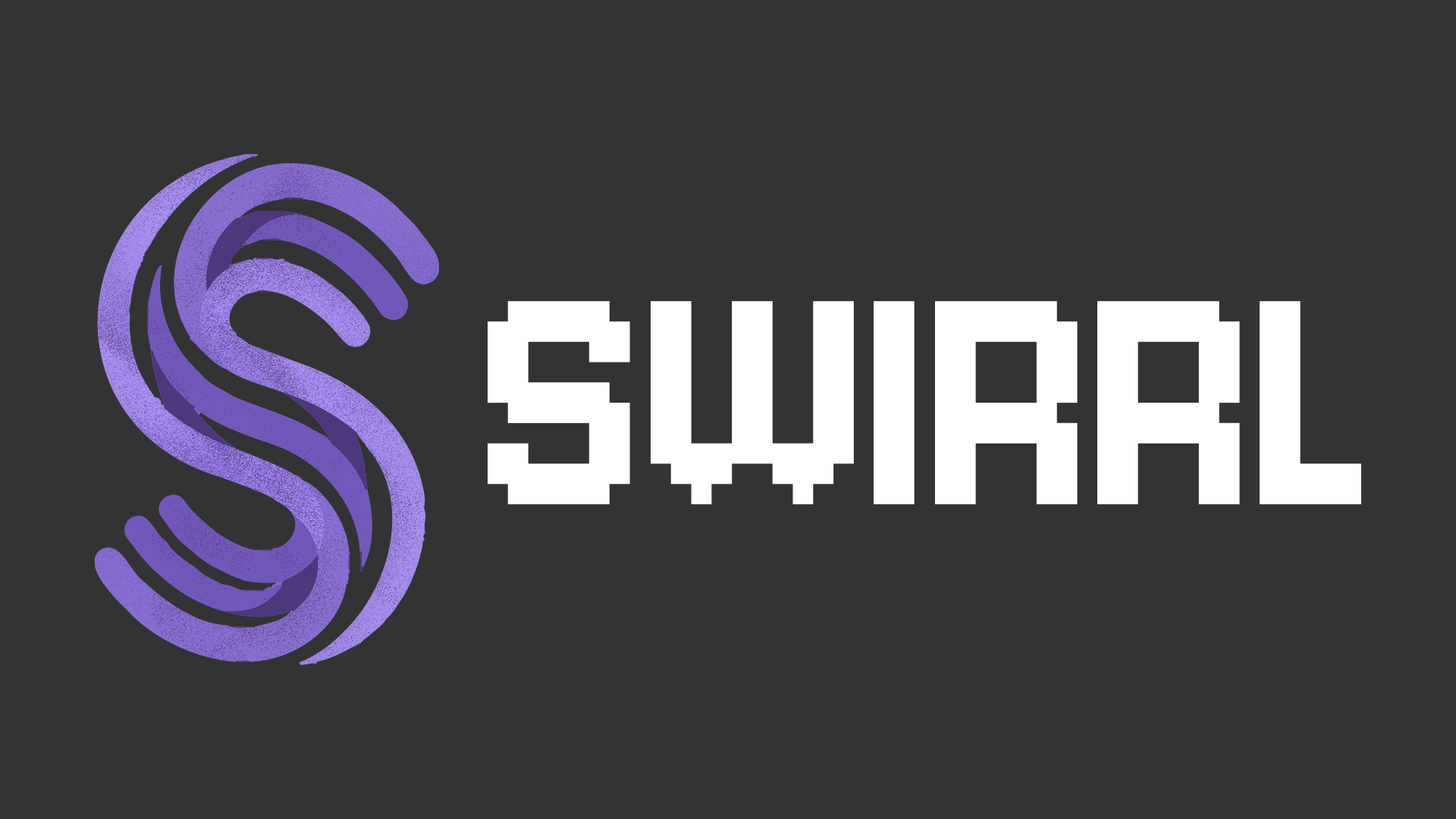
<style>
.page{position:relative;width:1456px;height:819px;background:#333333}
.page>*{position:absolute;margin:0}
.t1{font:379.2px "Jersey10-Regular";color:#ffffff}
</style>
<div class="page">
<p class="t1" style="left:488px;top:301px;width:873px;height:203px">SWIRRL</p>
</div>
